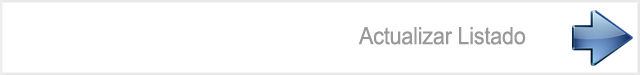
<style>
.page{position:relative;width:640px;height:75px;background:#ffffff}
.page>*{position:absolute;margin:0}
.t1{font:24px "ArialMT";letter-spacing:-0.01em;color:#999999;scale:0.9 1}
</style>
<div class="page">
<p class="t1" style="left:358px;top:27px;width:168px;height:18px">Actualizar Listado</p>
</div>
